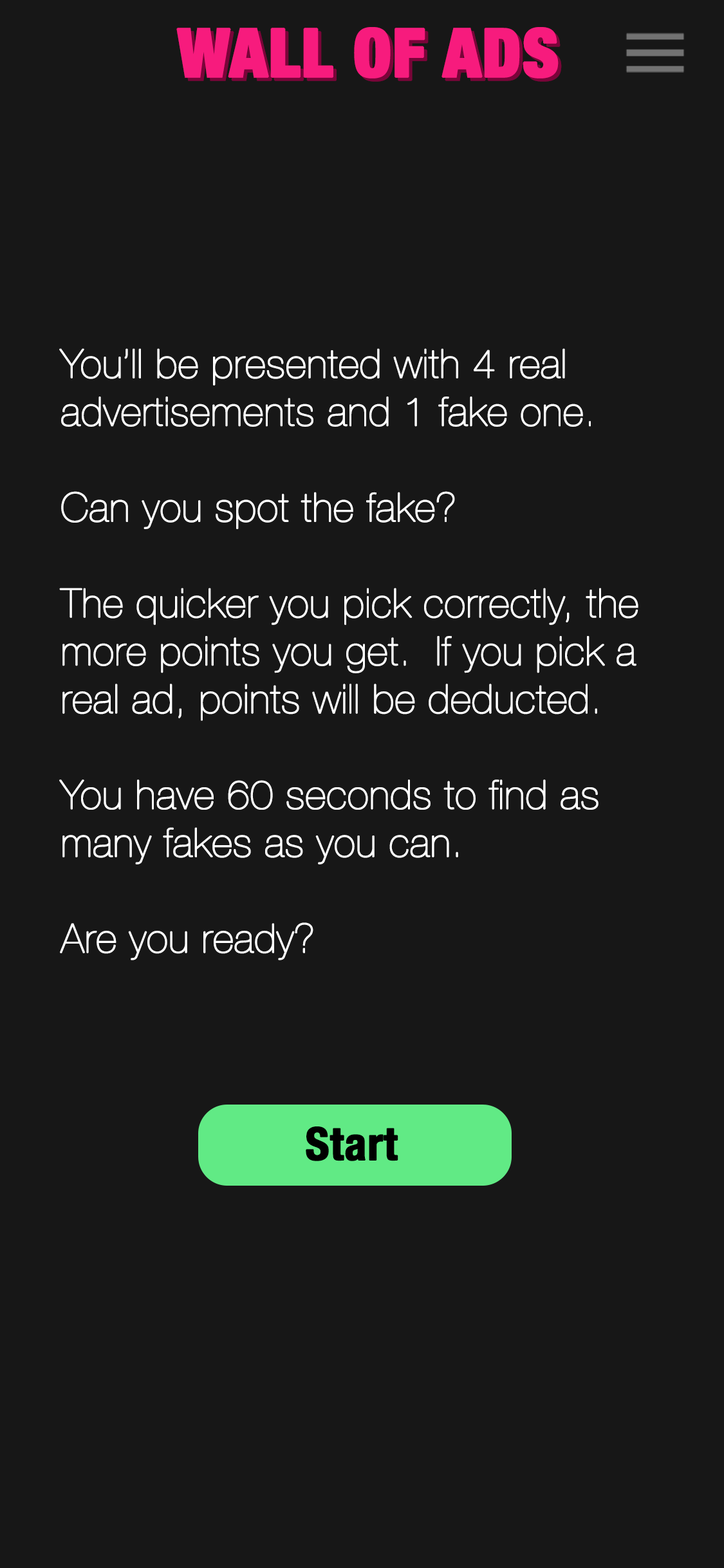
<style>
.page{position:relative;width:724px;height:1568px;background:#171717}
.page>*{position:absolute;margin:0}
.t1{font:66.9px "HelveticaNeue-CondensedBlack";color:#f71b7d;font-weight:bold}
.t2{font:39.9px "HelveticaNeue-UltraLight";color:#ffffff;font-weight:bold}
.t3{font:45.1px "HelveticaNeue-CondensedBold";color:#000000;font-weight:bold}
</style>
<div class="page">
<p class="t1" style="left:176px;top:27px;width:383px;height:52px">WALL OF ADS</p>
<p class="t1" style="left:180px;top:30px;width:382px;height:52px">WALL OF ADS</p>
<p class="t2" style="left:59px;top:348px;width:580px;height:612px">You’ll be presented with 4 real advertisements and 1 fake one.<br><br>Can you spot the fake?<br><br>The quicker you pick correctly, the more points you get.  If you pick a real ad, points will be deducted.<br><br>You have 60 seconds to find as many fakes as you can.<br><br>Are you ready?</p>
<p class="t3" style="left:306px;top:1126px;width:92px;height:35px">Start</p>
</div>
